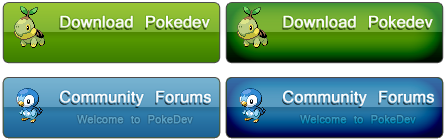
<style>
.page{position:relative;width:446px;height:140px}
.page>*{position:absolute;margin:0}
.t1{font:18px "Vrinda";letter-spacing:-0.01em;color:#ffffff;font-weight:bold}
.t2{font:12px "Vrinda";letter-spacing:-0.01em;color:#5ba2c5;font-weight:bold}
.t3{font:12px "Vrinda";letter-spacing:-0.01em;font-weight:bold}
</style>
<div class="page">
<p class="t1" style="left:60px;top:15px;width:150px;height:13px">Download Pokedev</p>
<p class="t1" style="left:283px;top:15px;width:150px;height:13px">Download Pokedev</p>
<p class="t1" style="left:60px;top:90px;width:151px;height:16px">Community Forums</p>
<p class="t1" style="left:283px;top:90px;width:151px;height:16px">Community Forums</p>
<p class="t2" style="left:77px;top:115px;width:116px;height:9px">Welcome to PokeDev</p>
<p class="t3" style="left:300px;top:115px;width:116px;height:9px">Welcome to PokeDev</p>
</div>
